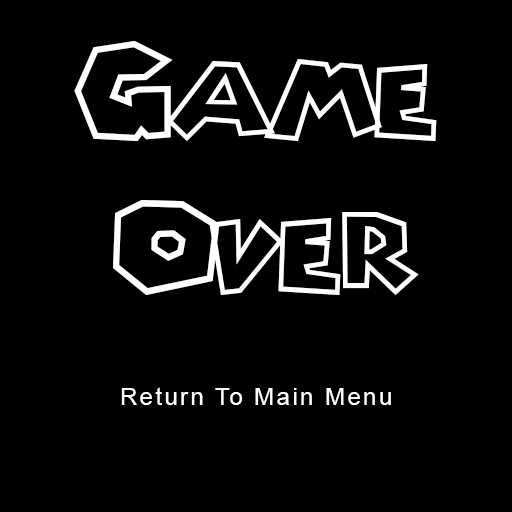
<style>
.page{position:relative;width:512px;height:512px;background:#000000}
.page>*{position:absolute;margin:0}
.t1{font:128px "Chlorinap-Regular";letter-spacing:0.1em;color:#ffffff}
.t2{font:60px "Chlorinap-Regular";letter-spacing:0.1em;color:#ffffff}
.t3{font:24px "ArialMT";letter-spacing:0.1em;color:#ffffff}
</style>
<div class="page">
<p class="t1" style="left:74px;top:41px;width:363px;height:254px;text-align:center"><span class="t2">  </span>Game <br>Over</p>
<p class="t3" style="left:121px;top:387px;width:270px;height:18px">Return To Main Menu</p>
</div>
